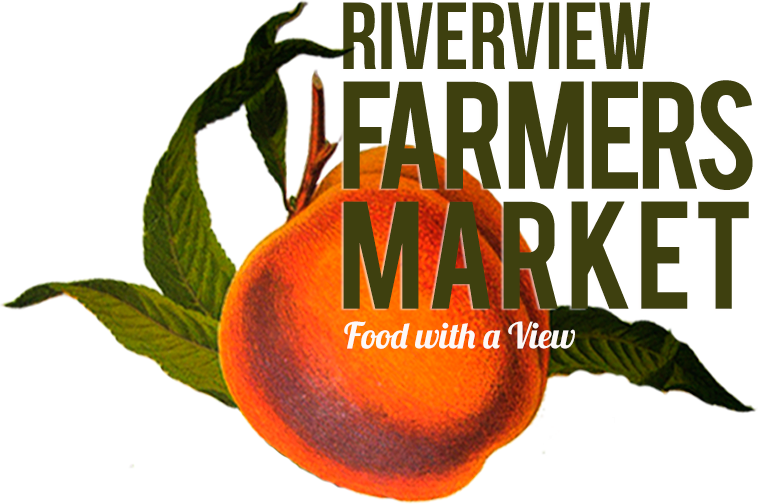
<style>
.page{position:relative;width:758px;height:504px;background:#ffffff}
.page>*{position:absolute;margin:0}
.t1{font:95px "BebasNeue";color:#3e400f}
.t2{font:120px/120px "Bebas";letter-spacing:-0.05em;color:#3e400f}
.t3{font:145px/128px "Allura-Regular";color:#3b3e00}
.t4{font:120px/120px "Bebas";color:#3e400f}
.t5{font:36px "Lobster1.3";letter-spacing:-0.01em;color:#fcf9f8}
</style>
<div class="page">
<p class="t1" style="left:343px;top:2px;width:307px;height:67px">Riverview</p>
<p class="t2" style="left:343px;top:80px;width:410px;height:229px"><span class="t3"><br></span>FARMERS <br><span class="t4">MARKET</span></p>
<p class="t5" style="left:344px;top:321px;width:231px;height:28px">Food with a View</p>
</div>
